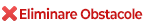
<style>
.page{position:relative;width:143px;height:26px;background:#ffffff}
.page>*{position:absolute;margin:0}
.t1{font:14.3px "Montserrat-Bold";letter-spacing:-0.04em;color:#ca1414;scale:0.88 1}
</style>
<div class="page">
<p class="t1" style="left:20px;top:7px;width:123px;height:13px">Eliminare Obstacole</p>
</div>
